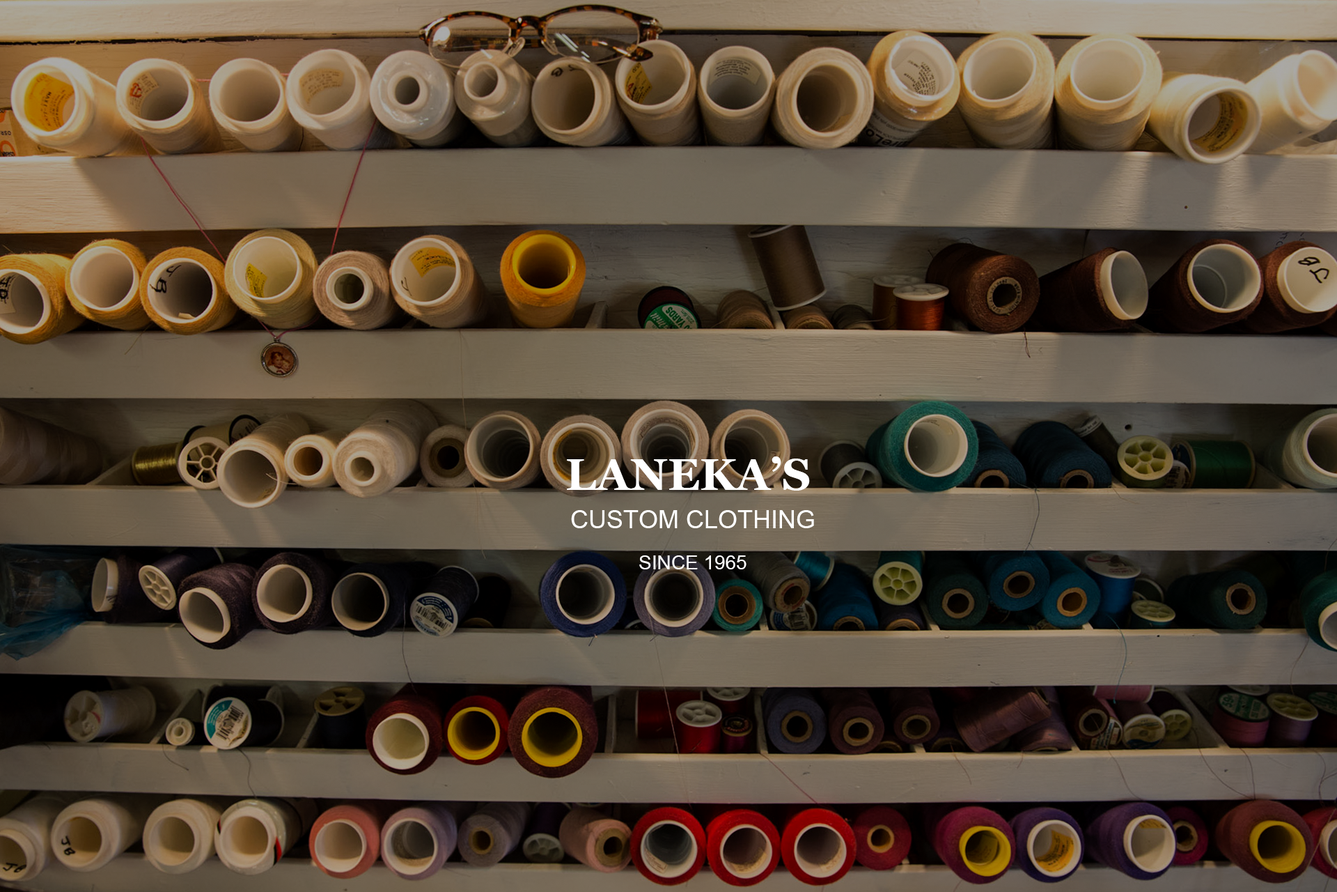
<style>
.page{position:relative;width:1337px;height:892px}
.page>*{position:absolute;margin:0}
.t1{font:44.6px "Georgia-Bold";color:#ffffff}
.t2{font:25.1px "ArialMT";color:#ffffff}
.t3{font:19.5px "ArialMT";color:#ffffff}
</style>
<div class="page">
<p class="t1" style="left:567px;top:456px;width:243px;height:34px">LANEKA’S</p>
<p class="t2" style="left:571px;top:510px;width:243px;height:59px;text-align:center">CUSTOM CLOTHING<br><br><span class="t3">SINCE 1965</span></p>
</div>
